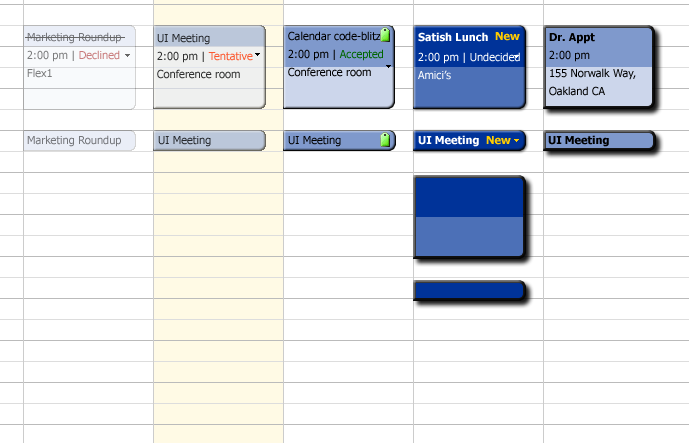
<style>
.page{position:relative;width:689px;height:443px;background:#ffffff}
.page>*{position:absolute;margin:0}
.t1{font:11px/18px "Tahoma";color:#75777b}
.t2{font:11px/13px "Tahoma";color:#75777b}
.t3{font:11px/18px "Tahoma";color:#303030}
.t4{font:11px/14px "Tahoma";color:#000000}
.t5{font:11px/18px "Tahoma";color:#000000}
.t6{font:11px/18px "Tahoma";color:#006600}
.t7{font:11px/20px "Tahoma";color:#ffffff}
.t8{font:11px/20px "Tahoma-Bold";color:#ffffff}
.t9{font:11px/18px "Tahoma";color:#ffffff}
.t10{font:11px "Tahoma-Bold";color:#ffcc00}
.t11{font:11px/18px "Tahoma-Bold";color:#000000}
.t12{font:11px "Tahoma";color:#25282c}
.t13{font:11px "Tahoma";color:#000000}
.t14{font:11px "Tahoma-Bold";color:#ffffff}
.t15{font:11px "Tahoma-Bold";color:#000000}
</style>
<div class="page">
<p class="t1" style="left:27px;top:32px;width:94px;height:115px">Marketing Roundup<br>2:00 pm | Declined<br>Flex1<br><br><br><br><span class="t2">Marketing Roundup</span></p>
<p class="t3" style="left:157px;top:34px;width:96px;height:45px">UI Meeting<br>2:00 pm | Tentative<br>Conference room</p>
<p class="t4" style="left:288px;top:31px;width:95px;height:46px">Calendar code-blitz<br><span class="t5">2:00 pm | </span><span class="t6">Accepted<br></span><span class="t5">Conference room</span></p>
<p class="t7" style="left:418px;top:32px;width:102px;height:48px"><span class="t8">Satish Lunch<br></span>2:00 pm | Undecided<br><span class="t9">Amici’s</span></p>
<p class="t10" style="left:495px;top:32px;width:25px;height:9px">New</p>
<p class="t5" style="left:549px;top:33px;width:87px;height:63px"><span class="t11">Dr. Appt<br></span>2:00 pm<br>155 Norwalk Way, <br>Oakland CA</p>
<p class="t12" style="left:158px;top:136px;width:53px;height:11px">UI Meeting</p>
<p class="t13" style="left:288px;top:136px;width:53px;height:11px">UI Meeting</p>
<p class="t14" style="left:418px;top:135px;width:61px;height:12px">UI Meeting</p>
<p class="t10" style="left:486px;top:136px;width:25px;height:9px">New</p>
<p class="t15" style="left:548px;top:135px;width:61px;height:12px">UI Meeting</p>
</div>
